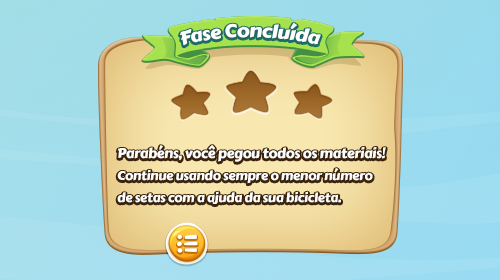
<style>
.page{position:relative;width:500px;height:280px}
.page>*{position:absolute;margin:0}
.t1{font:18.2px "CarterOne";letter-spacing:-0.02em;color:#ffffff;scale:1.05 1}
.t2{font:13px/22px "CarterOne";letter-spacing:-0.02em;color:#ffffff}
.t3{font:14px/22px "CarterOne";letter-spacing:-0.02em;color:#ffffff}
</style>
<div class="page">
<p class="t1" style="left:180px;top:22px;width:141px;height:24px">Fase Concluída</p>
<p class="t2" style="left:117px;top:145px;width:269px;height:59px"><span class="t3">Parabéns, você pegou todos os materiais!<br></span>Continue usando sempre o menor número <br>de setas com a ajuda da sua bicicleta.</p>
</div>
